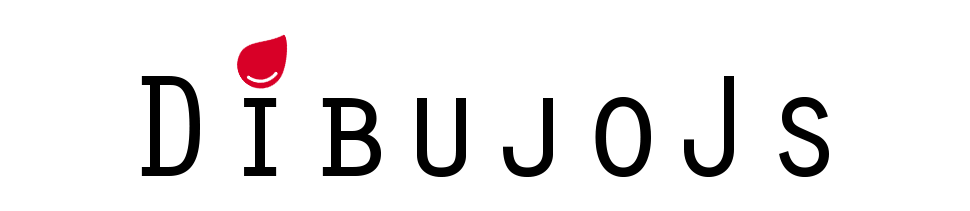
<style>
.page{position:relative;width:970px;height:211px;background:#ffffff}
.page>*{position:absolute;margin:0}
.t1{font:150px "OratorStd";letter-spacing:0.005em;color:#000000}
</style>
<div class="page">
<p class="t1" style="left:141px;top:76px;width:688px;height:101px">DibujoJs</p>
</div>
